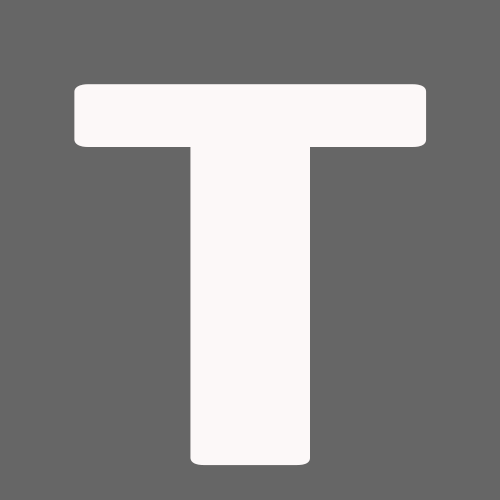
<style>
.page{position:relative;width:500px;height:500px;background:#666666}
.page>*{position:absolute;margin:0}
.t1{font:476.1px "Norwester-Regular";color:#fcf8f8;scale:1.85 1}
</style>
<div class="page">
<p class="t1" style="left:74px;top:84px;width:353px;height:382px">T</p>
</div>
